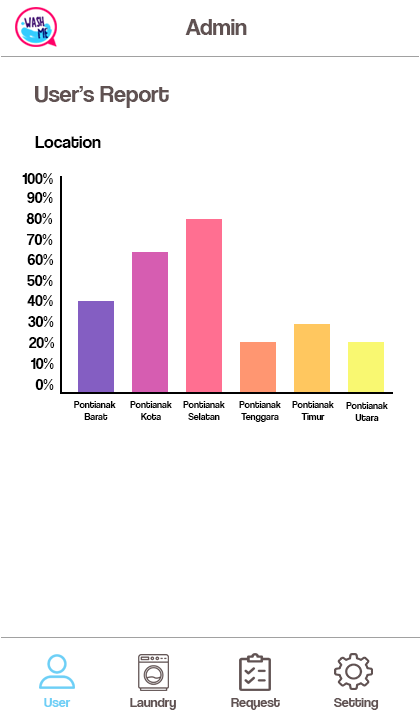
<style>
.page{position:relative;width:420px;height:720px;background:#ffffff}
.page>*{position:absolute;margin:0}
.t1{font:24px "CoolveticaRg-Regular";color:#605252}
.t2{font:18px "CoolveticaRg-Regular";color:#000000}
.t3{font:16px "CoolveticaRg-Regular";color:#000000}
.t4{font:10px "CoolveticaRg-Regular";color:#000000}
.t5{font:14px "CoolveticaRg-Regular";color:#6dcff6}
.t6{font:14px "CoolveticaRg-Regular";color:#605252}
</style>
<div class="page">
<p class="t1" style="left:185px;top:19px;width:62px;height:16px">Admin</p>
<p class="t1" style="left:35px;top:86px;width:134px;height:22px">User’s Report</p>
<p class="t2" style="left:35px;top:136px;width:66px;height:12px">Location</p>
<p class="t3" style="left:22px;top:173px;width:31px;height:11px">100%</p>
<p class="t3" style="left:27px;top:192px;width:26px;height:11px">90%</p>
<p class="t3" style="left:26px;top:213px;width:27px;height:11px">80%</p>
<p class="t3" style="left:26px;top:234px;width:27px;height:11px">70%</p>
<p class="t3" style="left:27px;top:254px;width:27px;height:11px">60%</p>
<p class="t3" style="left:27px;top:275px;width:26px;height:11px">50%</p>
<p class="t3" style="left:27px;top:295px;width:26px;height:11px">40%</p>
<p class="t3" style="left:28px;top:316px;width:26px;height:11px">30%</p>
<p class="t3" style="left:29px;top:337px;width:26px;height:11px">20%</p>
<p class="t3" style="left:30px;top:358px;width:24px;height:11px">10%</p>
<p class="t3" style="left:35px;top:379px;width:19px;height:11px">0%</p>
<p class="t4" style="left:74px;top:401px;width:42px;height:19px;text-align:center">Pontianak <br>Barat</p>
<p class="t4" style="left:130px;top:401px;width:42px;height:19px;text-align:center">Pontianak<br>Kota</p>
<p class="t4" style="left:183px;top:401px;width:42px;height:19px;text-align:center">Pontianak<br>Selatan</p>
<p class="t4" style="left:239px;top:401px;width:42px;height:21px;text-align:center">Pontianak<br>Tenggara</p>
<p class="t4" style="left:292px;top:401px;width:42px;height:19px;text-align:center">Pontianak<br>Timur</p>
<p class="t4" style="left:346px;top:402px;width:42px;height:19px;text-align:center">Pontianak<br>Utara</p>
<p class="t5" style="left:44px;top:698px;width:27px;height:9px">User</p>
<p class="t6" style="left:130px;top:698px;width:46px;height:12px">Laundry</p>
<p class="t6" style="left:231px;top:698px;width:49px;height:12px">Request</p>
<p class="t6" style="left:334px;top:698px;width:45px;height:12px">Setting</p>
</div>
